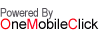
<style>
.page{position:relative;width:100px;height:40px;background:#ffffff}
.page>*{position:absolute;margin:0}
.t1{font:12px "ArialNarrow";color:#545158}
.t2{font:14px "ArialMT";color:#040205}
.t3{font:14px "ArialMT";color:#fb0006}
.t4{font:14px "ArialMT";color:#fd011f}
.t5{font:14px "ArialMT";color:#fd0214}
</style>
<div class="page">
<p class="t1" style="left:0px;top:8px;width:53px;height:12px">Powered By</p>
<p class="t2" style="left:0px;top:18px;width:99px;height:12px"><span class="t3">O</span>ne<span class="t4">M</span>obile<span class="t5">C</span>lick</p>
</div>
